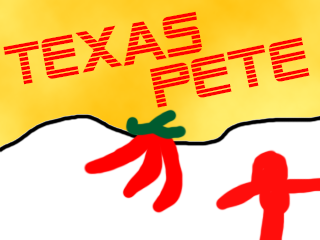
<style>
.page{position:relative;width:320px;height:240px;background:#ffffff}
.page>*{position:absolute;margin:0}
.t1{font:57.7px "AlienEncounters";color:#ff0000}
.t2{font:55.9px "AlienEncounters";color:#ff0000;scale:1.12 1}
</style>
<div class="page">
<p class="t1" style="left:3px;top:11px;width:199px;height:74px;rotate:-10deg">TEXAS</p>
<p class="t2" style="left:149px;top:37px;width:161px;height:71px;rotate:-12deg">Pete</p>
</div>
